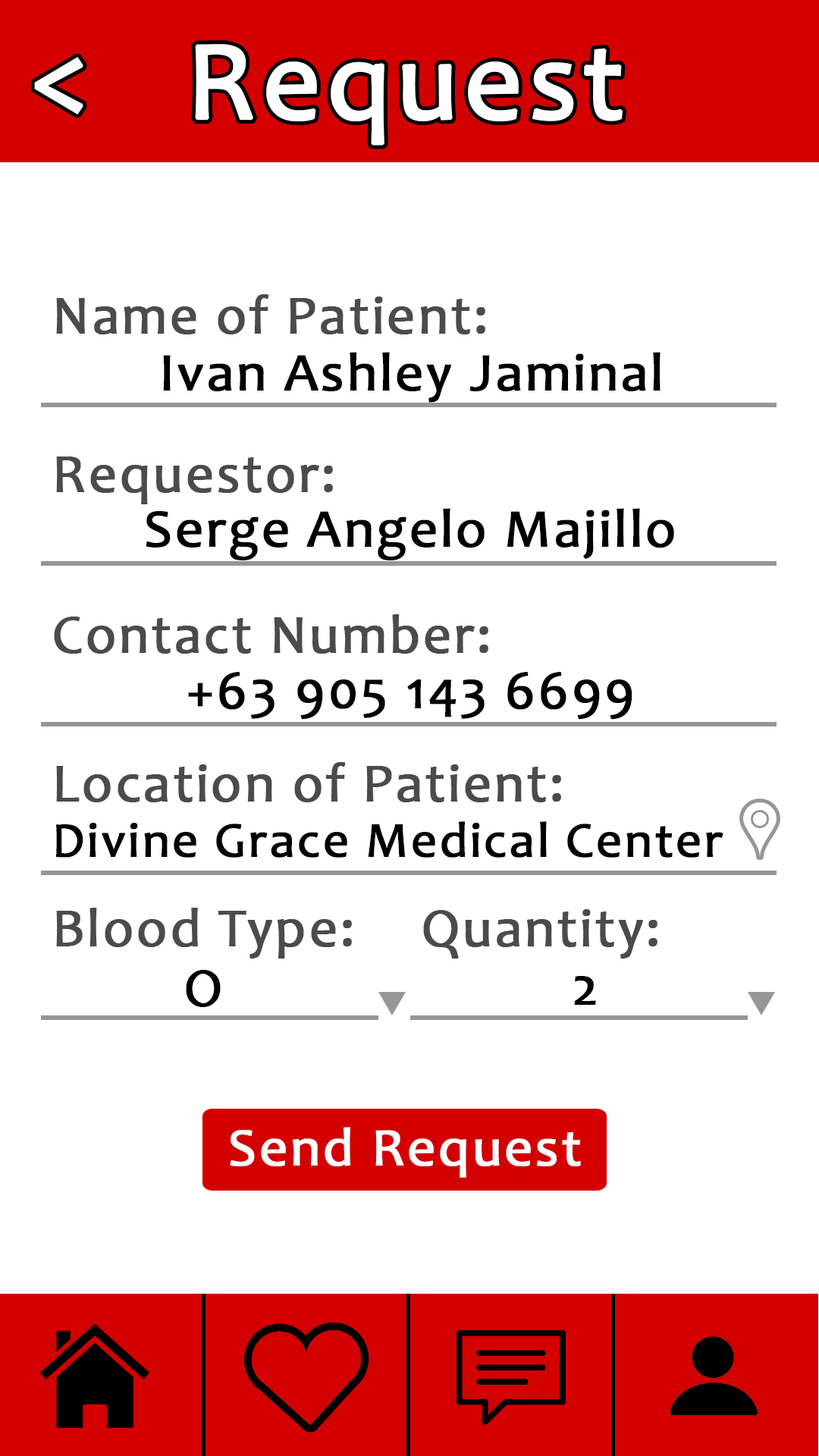
<style>
.page{position:relative;width:819px;height:1456px;background:#ffffff}
.page>*{position:absolute;margin:0}
.t1{font:113.4px "Candara";letter-spacing:0.03em;color:#ffffff;font-weight:bold}
.t2{font:113.7px "Candara";letter-spacing:0.03em;color:#ffffff;font-weight:bold}
.t3{font:54.6px "Candara";letter-spacing:0.03em;color:#4b4b4b;font-weight:bold}
.t4{font:54.3px "Candara";letter-spacing:0.03em;color:#000000;font-weight:bold}
.t5{font:50px "Candara";letter-spacing:0.03em;color:#000000;font-weight:bold}
.t6{font:54.6px "Candara";letter-spacing:0.03em;color:#000000;font-weight:bold}
.t7{font:54.3px "Candara";letter-spacing:0.03em;color:#ffffff;font-weight:bold}
</style>
<div class="page">
<p class="t1" style="left:195px;top:44px;width:428px;height:102px">Request</p>
<p class="t2" style="left:34px;top:57px;width:49px;height:58px">&lt;</p>
<p class="t3" style="left:56px;top:294px;width:429px;height:40px">Name of Patient:</p>
<p class="t4" style="left:163px;top:352px;width:497px;height:51px">Ivan Ashley Jaminal</p>
<p class="t3" style="left:56px;top:457px;width:277px;height:47px">Requestor:</p>
<p class="t4" style="left:146px;top:508px;width:528px;height:52px">Serge Angelo Majillo</p>
<p class="t3" style="left:54px;top:614px;width:434px;height:40px">Contact Number:</p>
<p class="t4" style="left:188px;top:672px;width:444px;height:48px">+63 905 143 6699</p>
<p class="t3" style="left:56px;top:762px;width:505px;height:40px">Location of Patient:</p>
<p class="t5" style="left:56px;top:821px;width:667px;height:37px">Divine Grace Medical Center</p>
<p class="t3" style="left:56px;top:908px;width:296px;height:51px">Blood Type:</p>
<p class="t3" style="left:423px;top:909px;width:234px;height:50px">Quantity:</p>
<p class="t6" style="left:186px;top:970px;width:35px;height:37px">O</p>
<p class="t6" style="left:574px;top:976px;width:22px;height:29px">2</p>
<p class="t7" style="left:230px;top:1127px;width:351px;height:51px">Send Request</p>
</div>
